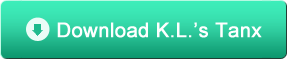
<style>
.page{position:relative;width:287px;height:59px}
.page>*{position:absolute;margin:0}
.t1{font:20px "ArialMT";color:#ffffff;font-weight:bold}
</style>
<div class="page">
<p class="t1" style="left:57px;top:22px;width:205px;height:16px">Download K.L.’s Tanx</p>
</div>
